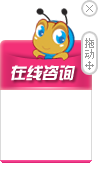
<style>
.page{position:relative;width:100px;height:188px;background:#ffffff}
.page>*{position:absolute;margin:0}
.t1{font:16px "¾­µä×ÛÒÕÌå¼ò-regular";letter-spacing:0.005em;color:#ffffff;font-style:italic}
</style>
<div class="page">
<p class="t1" style="left:11px;top:65px;width:64px;height:16px">在线咨询</p>
</div>
